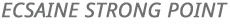
<style>
.page{position:relative;width:230px;height:24px;background:#ffffff}
.page>*{position:absolute;margin:0}
.t1{font:20px "NotoSans-Italic";color:#6f7070;font-weight:bold}
</style>
<div class="page">
<p class="t1" style="left:1px;top:2px;width:227px;height:16px">ECSAINE STRONG POINT</p>
</div>
